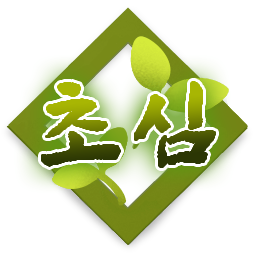
<style>
.page{position:relative;width:256px;height:256px;background:#ffffff}
.page>*{position:absolute;margin:0}
.t1{font:98.8px "SangSangRockOTF";letter-spacing:0.12em;scale:1.08 1}
</style>
<div class="page">
<p class="t1" style="left:42px;top:82px;width:173px;height:85px">초심</p>
</div>
